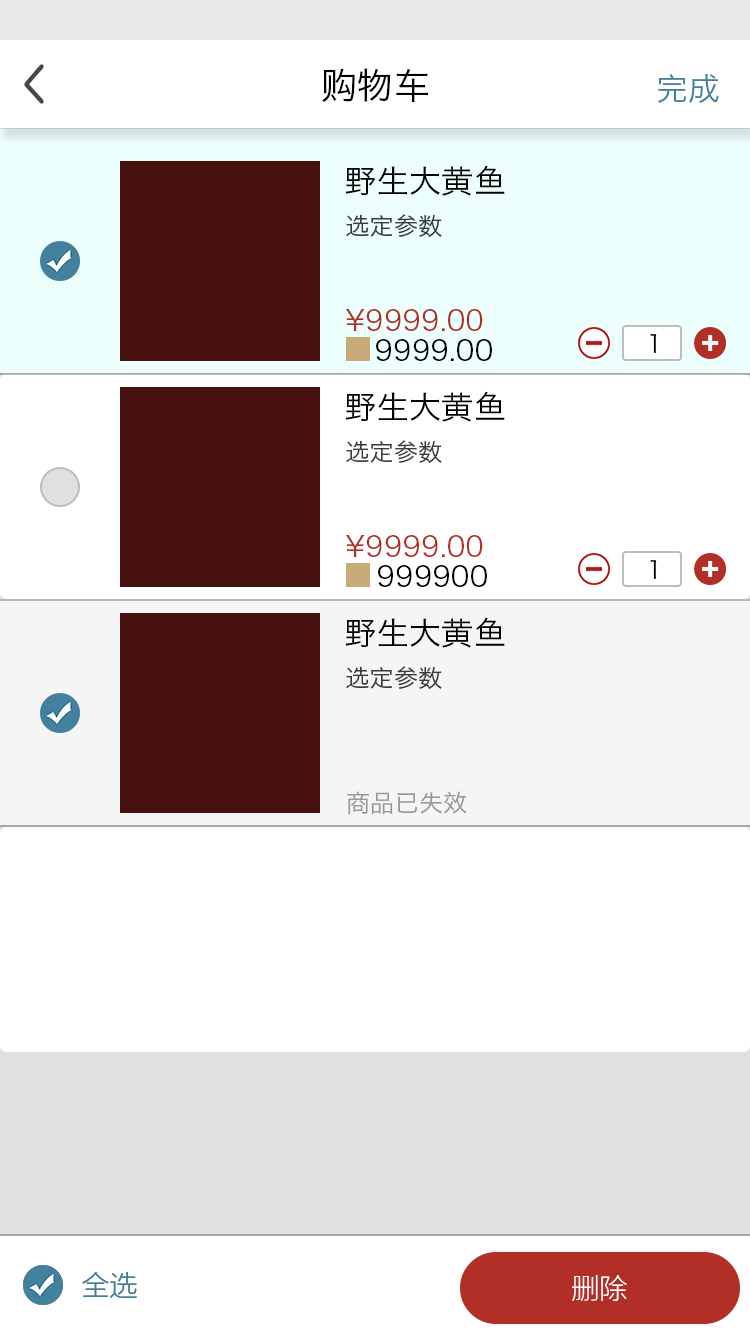
<style>
.page{position:relative;width:750px;height:1334px;background:#ffffff}
.page>*{position:absolute;margin:0}
.t1{font:36px "HiraginoSansGB-W3";color:#000000}
.t2{font:32px "HiraginoSansGB-W3";color:#42819d}
.t3{font:32px "HiraginoSansGB-W3";color:#000000}
.t4{font:24px "HiraginoSansGB-W3";color:#383d3c}
.t5{font:28px "HiraginoSansGB-W3";color:#b12f27}
.t6{font:28px "HiraginoSansGB-W3";color:#000000}
.t7{font:24px "HiraginoSansGB-W3";color:#000000}
.t8{font:24px "HiraginoSansGB-W3";color:#3d3d3d}
.t9{font:24px "HiraginoSansGB-W3";color:#3a3a3a}
.t10{font:24px "HiraginoSansGB-W3";color:#989898}
.t11{font:28px "MicrosoftYaHeiLight";color:#42819d}
.t12{font:28px "MicrosoftYaHeiLight";color:#ffffff}
</style>
<div class="page">
<p class="t1" style="left:322px;top:68px;width:106px;height:35px">购物车</p>
<p class="t2" style="left:658px;top:74px;width:61px;height:29px">完成</p>
<p class="t3" style="left:345px;top:165px;width:160px;height:31px">野生大黄鱼</p>
<p class="t4" style="left:346px;top:214px;width:96px;height:23px">选定参数</p>
<p class="t5" style="left:345px;top:309px;width:138px;height:22px">¥9999.00</p>
<p class="t6" style="left:376px;top:339px;width:116px;height:22px">9999.00</p>
<p class="t7" style="left:650px;top:334px;width:7px;height:19px">1</p>
<p class="t3" style="left:345px;top:391px;width:160px;height:31px">野生大黄鱼</p>
<p class="t8" style="left:346px;top:440px;width:96px;height:23px">选定参数</p>
<p class="t5" style="left:345px;top:535px;width:138px;height:22px">¥9999.00</p>
<p class="t6" style="left:378px;top:565px;width:109px;height:22px">999900</p>
<p class="t7" style="left:650px;top:560px;width:7px;height:19px">1</p>
<p class="t3" style="left:345px;top:617px;width:160px;height:31px">野生大黄鱼</p>
<p class="t9" style="left:346px;top:666px;width:96px;height:23px">选定参数</p>
<p class="t10" style="left:347px;top:791px;width:120px;height:23px">商品已失效</p>
<p class="t11" style="left:82px;top:1272px;width:55px;height:26px">全选</p>
<p class="t11" style="left:82px;top:1272px;width:55px;height:26px">全选</p>
<p class="t12" style="left:572px;top:1275px;width:55px;height:26px">删除</p>
</div>
